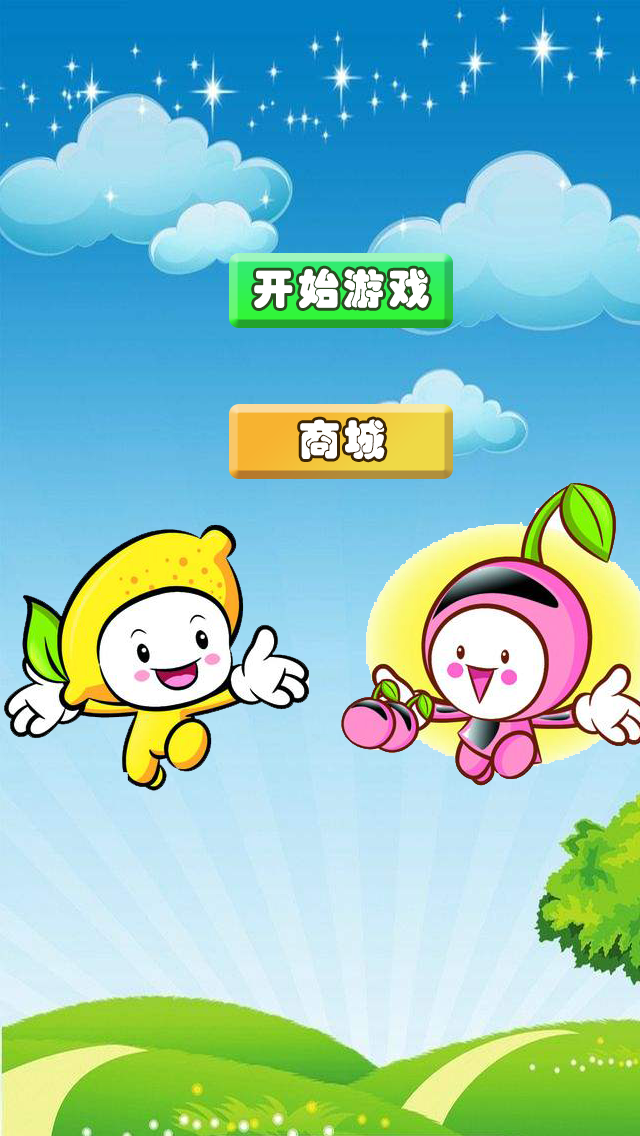
<style>
.page{position:relative;width:640px;height:1136px}
.page>*{position:absolute;margin:0}
.t1{font:41.7px "STHupo";letter-spacing:0.086em;color:#ffffff}
</style>
<div class="page">
<p class="t1" style="left:254px;top:268px;width:175px;height:40px">开始游戏</p>
<p class="t1" style="left:300px;top:419px;width:85px;height:41px">商城</p>
</div>
